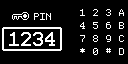
<style>
.page{position:relative;width:128px;height:64px;background:#000000}
.page>*{position:absolute;margin:0}
.t1{font:12px "ProFontWindows";color:#ffffff}
.t2{font:24px "ProFontWindows";color:#ffffff}
</style>
<div class="page">
<p class="t1" style="left:34px;top:13px;width:17px;height:7px">PIN</p>
<p class="t1" style="left:80px;top:9px;width:5px;height:7px">1</p>
<p class="t1" style="left:93px;top:9px;width:5px;height:7px">2</p>
<p class="t1" style="left:106px;top:9px;width:5px;height:7px">3</p>
<p class="t1" style="left:119px;top:9px;width:5px;height:7px">A</p>
<p class="t1" style="left:80px;top:22px;width:5px;height:7px">4</p>
<p class="t1" style="left:93px;top:22px;width:5px;height:7px">5</p>
<p class="t1" style="left:106px;top:22px;width:5px;height:7px">6</p>
<p class="t1" style="left:119px;top:22px;width:5px;height:7px">B</p>
<p class="t2" style="left:9px;top:32px;width:46px;height:14px">1234</p>
<p class="t1" style="left:80px;top:35px;width:5px;height:7px">7</p>
<p class="t1" style="left:93px;top:35px;width:5px;height:7px">8</p>
<p class="t1" style="left:106px;top:35px;width:5px;height:7px">9</p>
<p class="t1" style="left:119px;top:35px;width:5px;height:7px">C</p>
<p class="t1" style="left:80px;top:48px;width:5px;height:5px">*</p>
<p class="t1" style="left:93px;top:48px;width:5px;height:7px">0</p>
<p class="t1" style="left:106px;top:48px;width:5px;height:5px">#</p>
<p class="t1" style="left:119px;top:48px;width:5px;height:7px">D</p>
</div>
